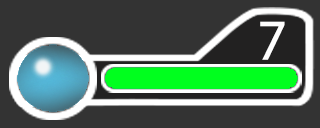
<style>
.page{position:relative;width:320px;height:128px;background:#333333}
.page>*{position:absolute;margin:0}
.t1{font:58.3px "MyriadPro-Regular";color:#fefefe}
</style>
<div class="page">
<p class="t1" style="left:260px;top:21px;width:25px;height:39px">7</p>
</div>
